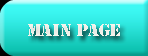
<style>
.page{position:relative;width:148px;height:56px}
.page>*{position:absolute;margin:0}
.t1{font:16px "StencilStd";color:#f4f4ec}
</style>
<div class="page">
<p class="t1" style="left:28px;top:24px;width:92px;height:12px">MAIN PAGE</p>
</div>
